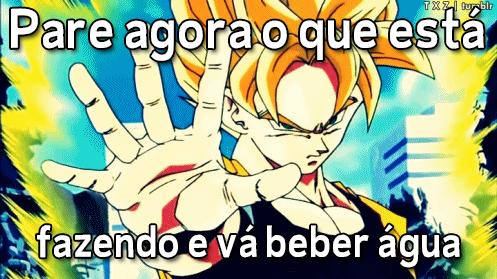
<style>
.page{position:relative;width:497px;height:279px}
.page>*{position:absolute;margin:0}
.t1{font:50px "BurbinCasualNC";color:#ffffff}
.t2{font:40px "BurbinCasualNC";color:#ffffff}
</style>
<div class="page">
<p class="t1" style="left:11px;top:7px;width:473px;height:54px">Pare agora o que está</p>
<p class="t2" style="left:37px;top:224px;width:423px;height:44px">fazendo e vá beber água</p>
</div>
